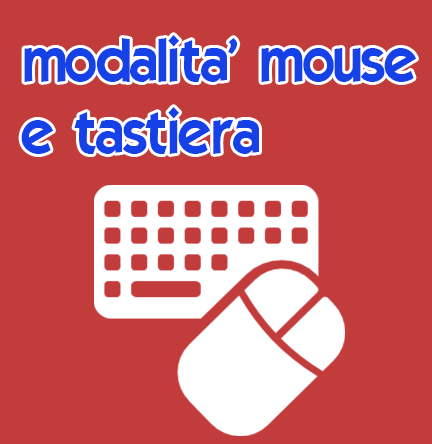
<style>
.page{position:relative;width:432px;height:444px;background:#c23c3c}
.page>*{position:absolute;margin:0}
.t1{font:60px "ELEGANCE";color:#1541e7}
</style>
<div class="page">
<p class="t1" style="left:21px;top:35px;width:395px;height:119px">modalita' mouse<br>e tastiera</p>
</div>
